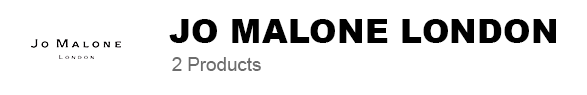
<style>
.page{position:relative;width:587px;height:95px;background:#ffffff}
.page>*{position:absolute;margin:0}
.t1{font:33.3px "Arial-Black";color:#000000}
.t2{font:18.7px "ArialMT";color:#6d6d6d}
</style>
<div class="page">
<p class="t1" style="left:169px;top:19px;width:387px;height:24px">JO MALONE LONDON</p>
<p class="t2" style="left:172px;top:57px;width:89px;height:14px">2 Products</p>
</div>
